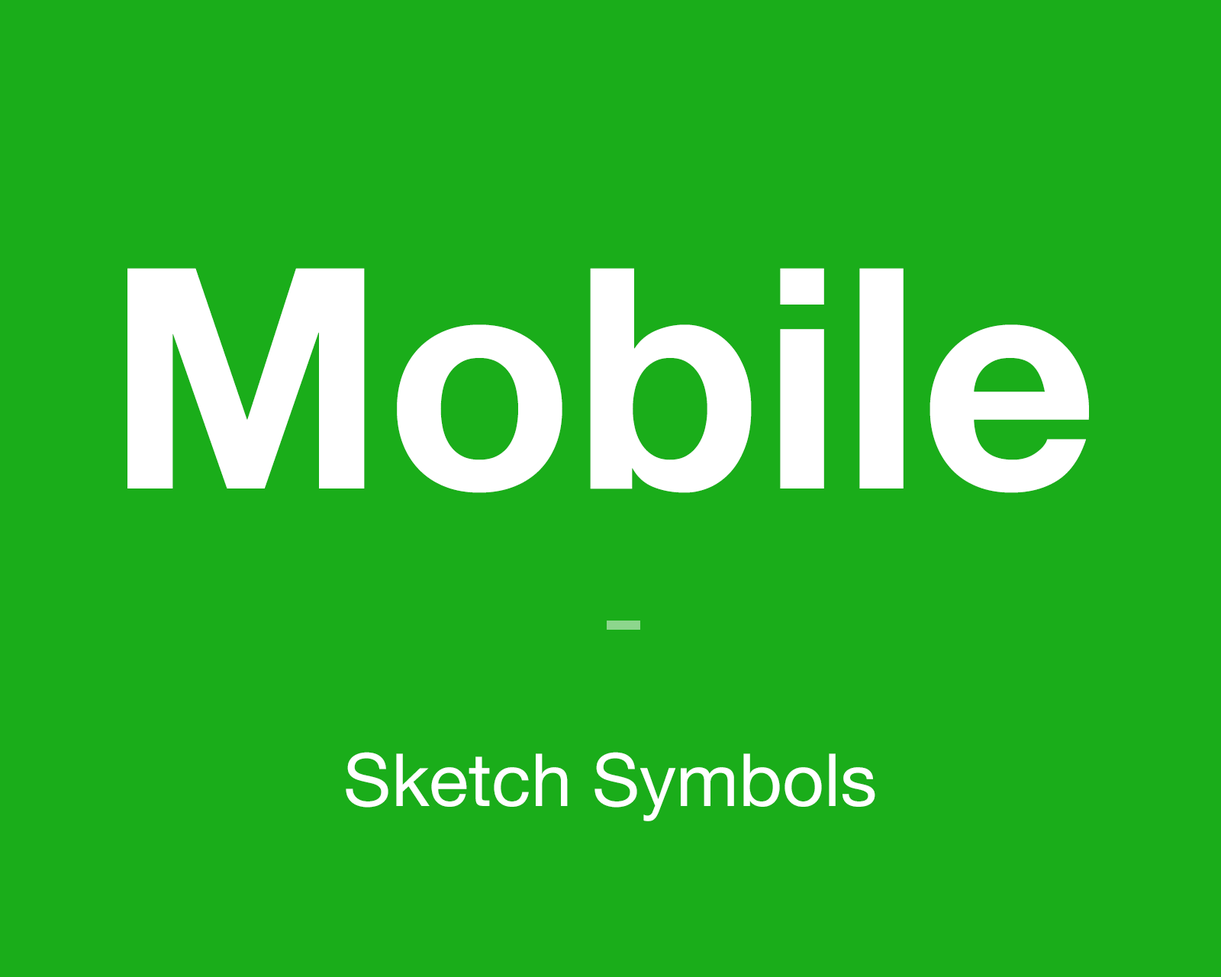
<style>
.page{position:relative;width:1221px;height:977px;background:#1aad1a}
.page>*{position:absolute;margin:0}
.t1{font:308.1px "HelveticaNeue-Bold";color:#ffffff}
.t2{font:73.3px "HelveticaNeue";color:#ffffff}
</style>
<div class="page">
<p class="t1" style="left:127px;top:268px;width:962px;height:225px">Mobile</p>
<p class="t2" style="left:346px;top:752px;width:529px;height:69px">Sketch Symbols</p>
</div>
